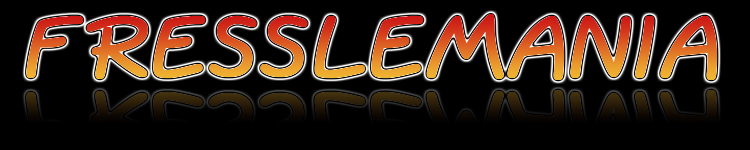
<style>
.page{position:relative;width:750px;height:150px;background:#000000}
.page>*{position:absolute;margin:0}
.t1{font:90px "QuillScript-Normal";font-variant:small-caps;font-weight:bold}
</style>
<div class="page">
<p class="t1" style="left:26px;top:14px;width:691px;height:66px">FRESSLEMANIA</p>
</div>
